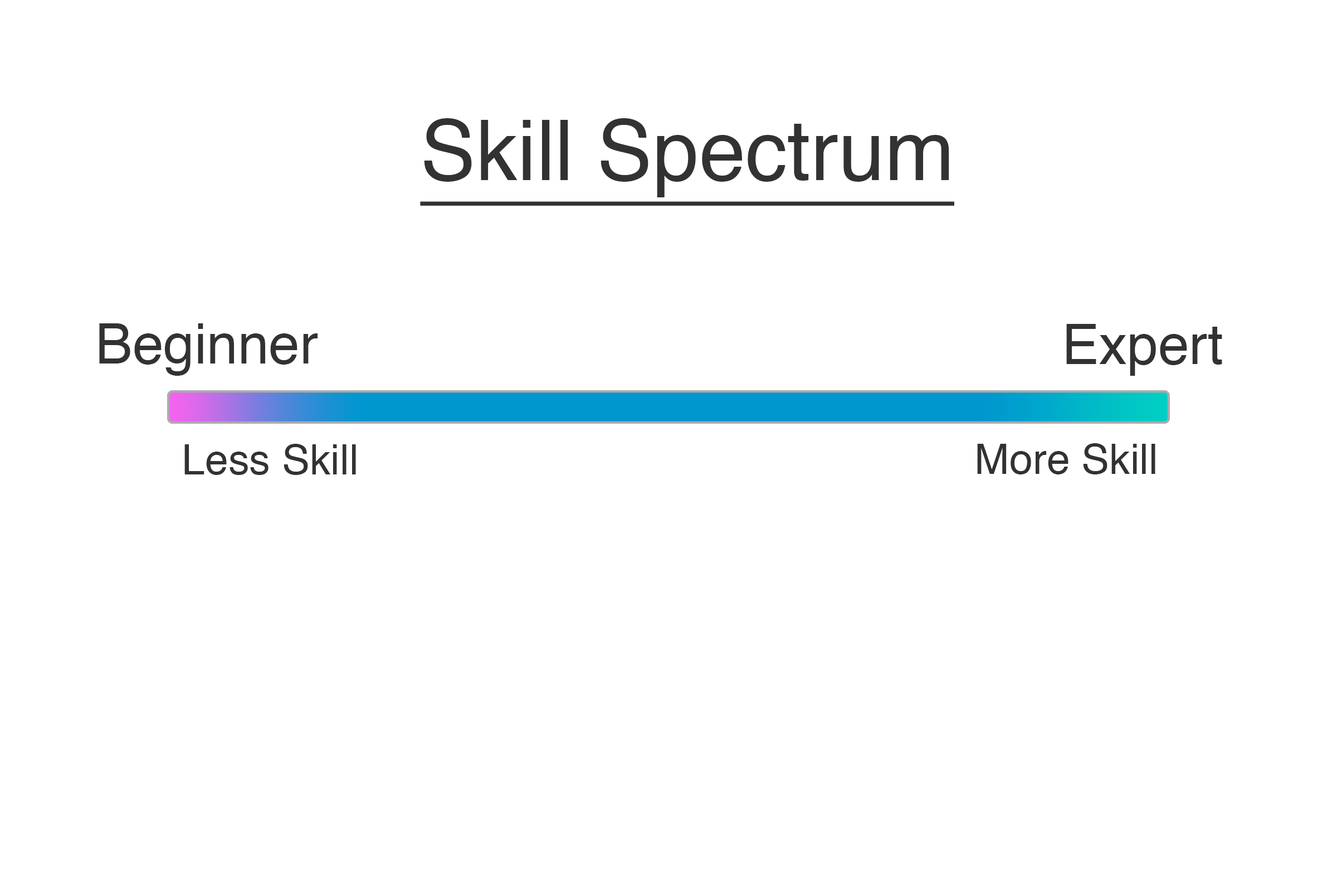
<style>
.page{position:relative;width:1337px;height:892px;background:#ffffff}
.page>*{position:absolute;margin:0}
.t1{font:83.6px "Helvetica";color:#333131;text-decoration:underline}
.t2{font:55.7px "Helvetica";color:#333131}
.t3{font:41.8px "Helvetica";color:#333131}
</style>
<div class="page">
<p class="t1" style="left:420px;top:118px;width:535px;height:88px">Skill Spectrum</p>
<p class="t2" style="left:99px;top:323px;width:219px;height:53px">Beginner</p>
<p class="t2" style="left:1067px;top:324px;width:156px;height:52px">Expert</p>
<p class="t3" style="left:184px;top:444px;width:172px;height:31px">Less Skill</p>
<p class="t3" style="left:977px;top:443px;width:179px;height:31px">More Skill</p>
</div>
